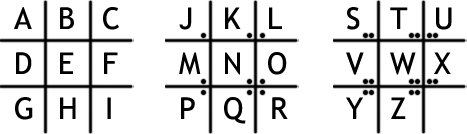
<style>
.page{position:relative;width:467px;height:134px;background:#ffffff}
.page>*{position:absolute;margin:0}
.t1{font:30px "TrebuchetMS";color:#000000}
</style>
<div class="page">
<p class="t1" style="left:14px;top:7px;width:18px;height:22px">A</p>
<p class="t1" style="left:60px;top:7px;width:14px;height:22px">B</p>
<p class="t1" style="left:103px;top:7px;width:16px;height:23px">C</p>
<p class="t1" style="left:179px;top:7px;width:13px;height:23px">J</p>
<p class="t1" style="left:225px;top:7px;width:16px;height:22px">K</p>
<p class="t1" style="left:269px;top:7px;width:13px;height:22px">L</p>
<p class="t1" style="left:347px;top:7px;width:13px;height:23px">S</p>
<p class="t1" style="left:390px;top:7px;width:18px;height:22px">T</p>
<p class="t1" style="left:436px;top:7px;width:16px;height:23px">U</p>
<p class="t1" style="left:16px;top:52px;width:16px;height:22px">D</p>
<p class="t1" style="left:60px;top:52px;width:14px;height:22px">E</p>
<p class="t1" style="left:104px;top:52px;width:14px;height:22px">F</p>
<p class="t1" style="left:179px;top:52px;width:22px;height:23px">M</p>
<p class="t1" style="left:225px;top:52px;width:15px;height:23px">N</p>
<p class="t1" style="left:268px;top:52px;width:19px;height:23px">O</p>
<p class="t1" style="left:346px;top:52px;width:18px;height:23px">V</p>
<p class="t1" style="left:390px;top:52px;width:26px;height:23px">W</p>
<p class="t1" style="left:434px;top:52px;width:17px;height:22px">X</p>
<p class="t1" style="left:15px;top:97px;width:18px;height:23px">G</p>
<p class="t1" style="left:60px;top:97px;width:16px;height:22px">H</p>
<p class="t1" style="left:107px;top:97px;width:4px;height:22px">I</p>
<p class="t1" style="left:181px;top:97px;width:14px;height:22px">P</p>
<p class="t1" style="left:224px;top:97px;width:22px;height:27px">Q</p>
<p class="t1" style="left:272px;top:97px;width:16px;height:22px">R</p>
<p class="t1" style="left:346px;top:97px;width:17px;height:22px">Y</p>
<p class="t1" style="left:391px;top:97px;width:15px;height:22px">Z</p>
</div>
